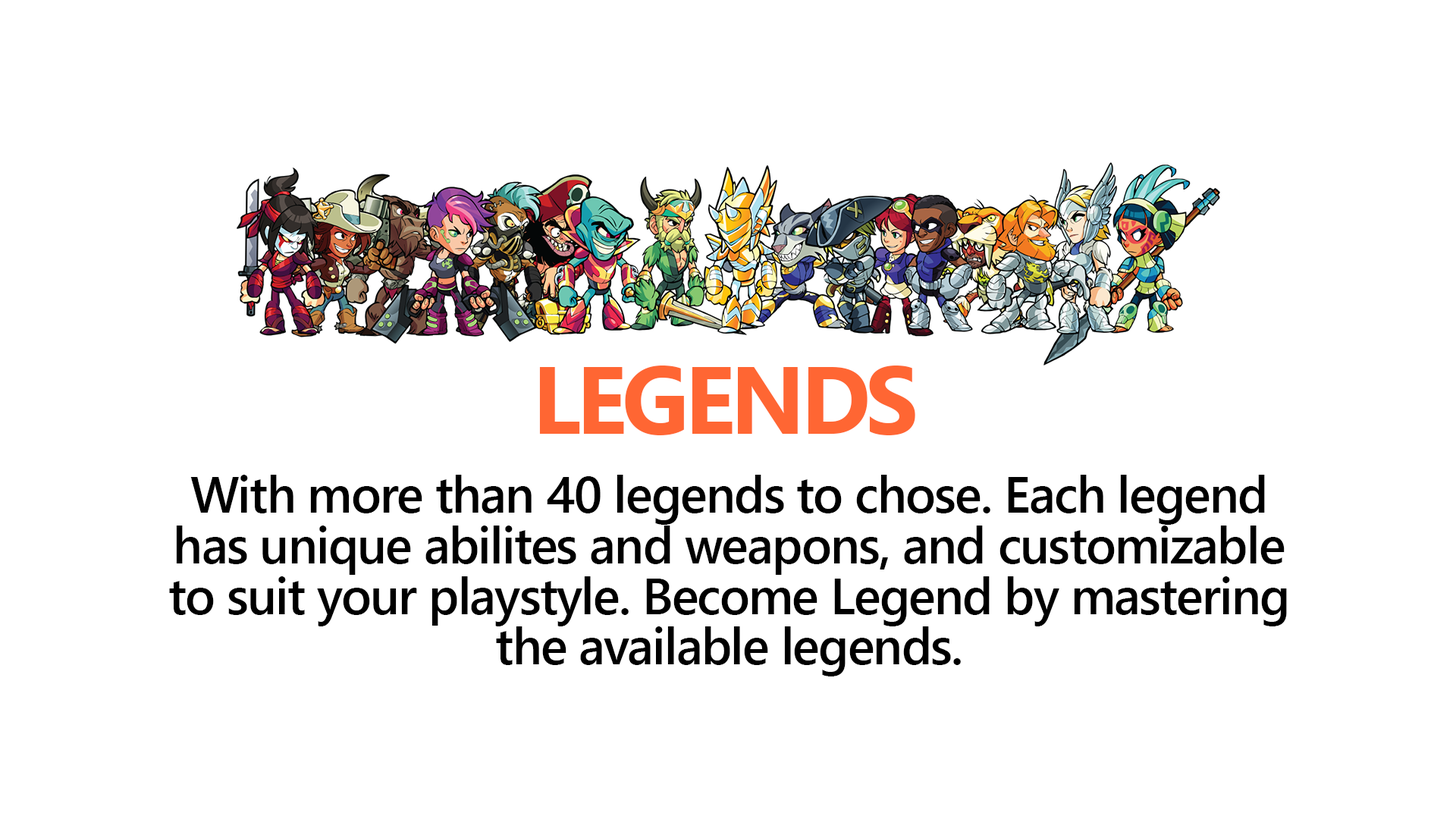
<style>
.page{position:relative;width:1456px;height:819px;background:#ffffff}
.page>*{position:absolute;margin:0}
.t1{font:94.8px "SegoeUI-Bold";letter-spacing:-0.05em;color:#ff6633}
.t2{font:50.6px/50.6px "SegoeUI-Semibold";letter-spacing:-0.025em;color:#000000}
</style>
<div class="page">
<p class="t1" style="left:539px;top:366px;width:376px;height:69px">LEGENDS</p>
<p class="t2" style="left:169px;top:475px;width:1118px;height:201px;text-align:center">With more than 40 legends to chose. Each legend<br>has unique abilites and weapons, and customizable<br>to suit your playstyle. Become Legend by mastering<br>the available legends.</p>
</div>
